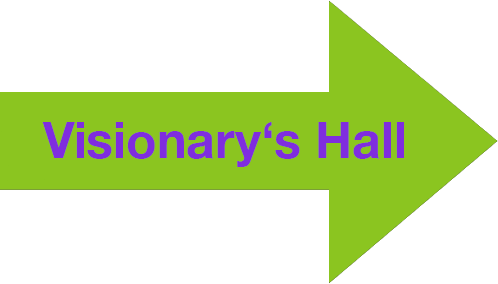
<style>
.page{position:relative;width:498px;height:284px;background:#ffffff}
.page>*{position:absolute;margin:0}
.t1{font:50px "HelveticaNeue-Bold";color:#7f2ddf}
</style>
<div class="page">
<p class="t1" style="left:42px;top:122px;width:362px;height:45px">Visionary‘s Hall</p>
</div>
